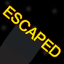
<style>
.page{position:relative;width:64px;height:64px;background:#000000}
.page>*{position:absolute;margin:0}
.t1{font:14.8px "ArialMT";color:#f6ff00}
</style>
<div class="page">
<p class="t1" style="left:2px;top:5px;width:59px;height:52px;rotate:41deg;opacity:0.97">ESCAPED</p>
</div>
